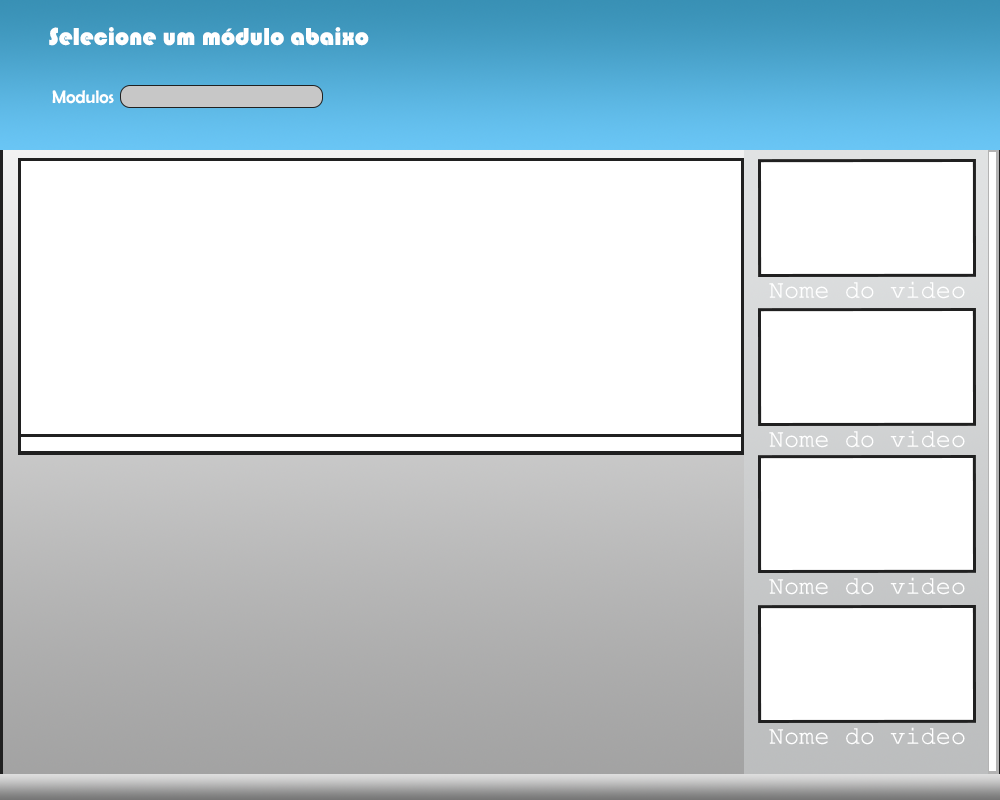
<style>
.page{position:relative;width:1000px;height:800px;background:#ffffff}
.page>*{position:absolute;margin:0}
.t1{font:25px "Bauhaus93";color:#ffffff}
.t2{font:18px "BerlinSansFB-Reg";color:#ffffff}
.t3{font:25px "CourierNewPSMT";color:#ffffff}
</style>
<div class="page">
<p class="t1" style="left:49px;top:27px;width:320px;height:19px">Selecione um módulo abaixo</p>
<p class="t2" style="left:52px;top:90px;width:62px;height:14px">Modulos</p>
<p class="t3" style="left:769px;top:281px;width:196px;height:18px">Nome do video</p>
<p class="t3" style="left:769px;top:430px;width:196px;height:18px">Nome do video</p>
<p class="t3" style="left:769px;top:577px;width:196px;height:18px">Nome do video</p>
<p class="t3" style="left:769px;top:727px;width:196px;height:18px">Nome do video</p>
</div>
